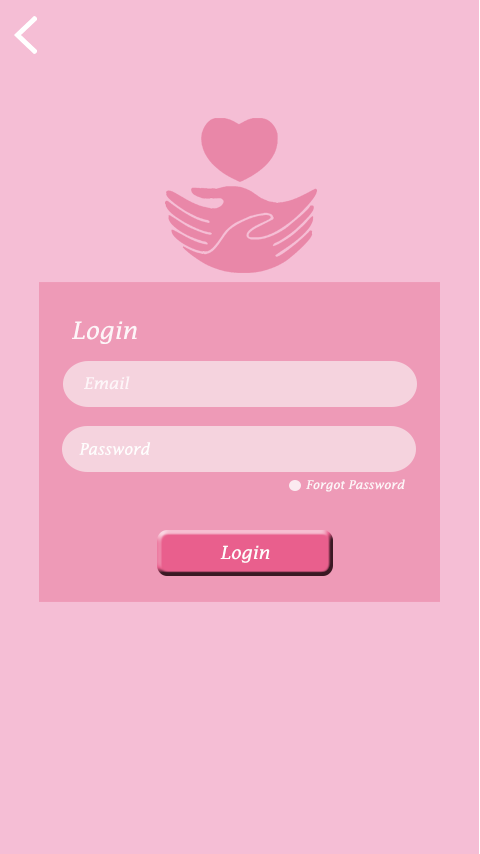
<style>
.page{position:relative;width:480px;height:854px;background:#f5bed5}
.page>*{position:absolute;margin:0}
.t1{font:24px "LucidaFax-Italic";color:#fdf5f8}
.t2{font:16px "LucidaFax-Italic";color:#fdf5f8}
.t3{font:15.9px "LucidaFax-Italic";color:#fefdfd;scale:0.95 1}
.t4{font:12px "LucidaFax-Italic";color:#fdf5f8}
.t5{font:18px "LucidaFax-Italic";color:#fefdfd}
</style>
<div class="page">
<p class="t1" style="left:72px;top:321px;width:65px;height:23px">Login</p>
<p class="t2" style="left:84px;top:376px;width:46px;height:14px">Email</p>
<p class="t3" style="left:79px;top:442px;width:72px;height:13px">Password</p>
<p class="t4" style="left:306px;top:479px;width:99px;height:13px">Forgot Password</p>
<p class="t5" style="left:220px;top:545px;width:50px;height:18px">Login</p>
</div>
